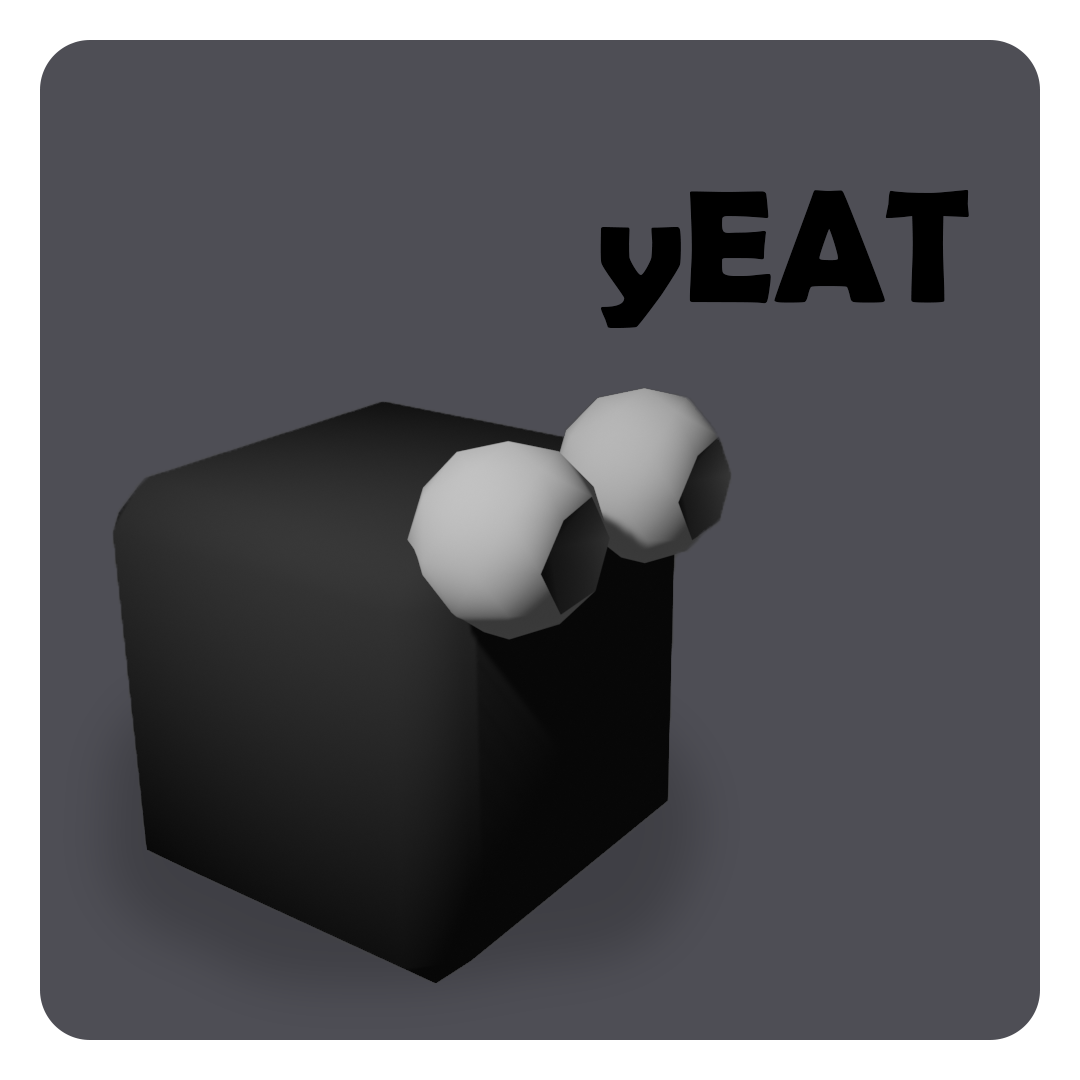
<style>
.page{position:relative;width:1080px;height:1080px;background:#4e4e55}
.page>*{position:absolute;margin:0}
.t1{font:161px "BerlinSansFBDemi-Bold";letter-spacing:-0.004em;color:#000000}
</style>
<div class="page">
<p class="t1" style="left:600px;top:190px;width:369px;height:138px">yEAT</p>
</div>
